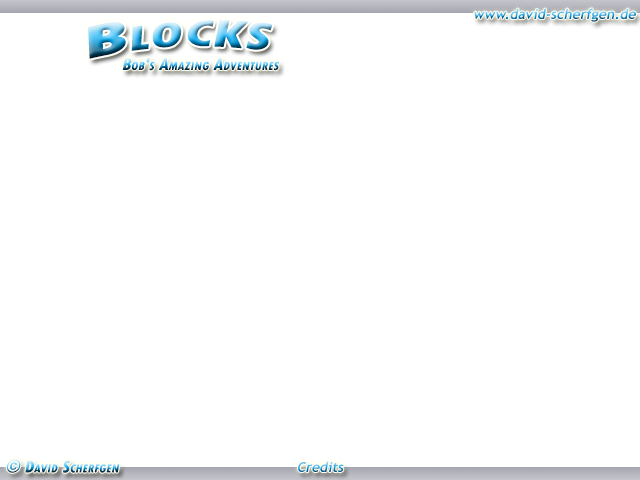
<style>
.page{position:relative;width:640px;height:480px;background:#ffffff}
.page>*{position:absolute;margin:0}
.t1{font:14px "TrebuchetMS-Bold";font-style:italic}
.t2{font:54px "TwCenMT-CondensedExtraBold";font-variant:small-caps;scale:1.07 1}
.t3{font:18px "TwCenMT-CondensedExtraBold";font-variant:small-caps;font-style:italic}
</style>
<div class="page">
<p class="t1" style="left:474px;top:8px;width:162px;height:14px">www.david-scherfgen.de</p>
<p class="t2" style="left:88px;top:20px;width:185px;height:39px">Blocks</p>
<p class="t3" style="left:122px;top:58px;width:157px;height:13px">Bob's Amazing Adventures</p>
<p class="t3" style="left:6px;top:459px;width:114px;height:14px">© David Scherfgen</p>
<p class="t1" style="left:298px;top:461px;width:46px;height:11px">Credits</p>
</div>
